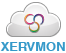
<style>
.page{position:relative;width:66px;height:53px;background:#ffffff}
.page>*{position:absolute;margin:0}
.t1{font:13px "HelveticaCE-Bold";color:#3599c9}
</style>
<div class="page">
<p class="t1" style="left:0px;top:42px;width:65px;height:9px">XERVMON</p>
</div>
